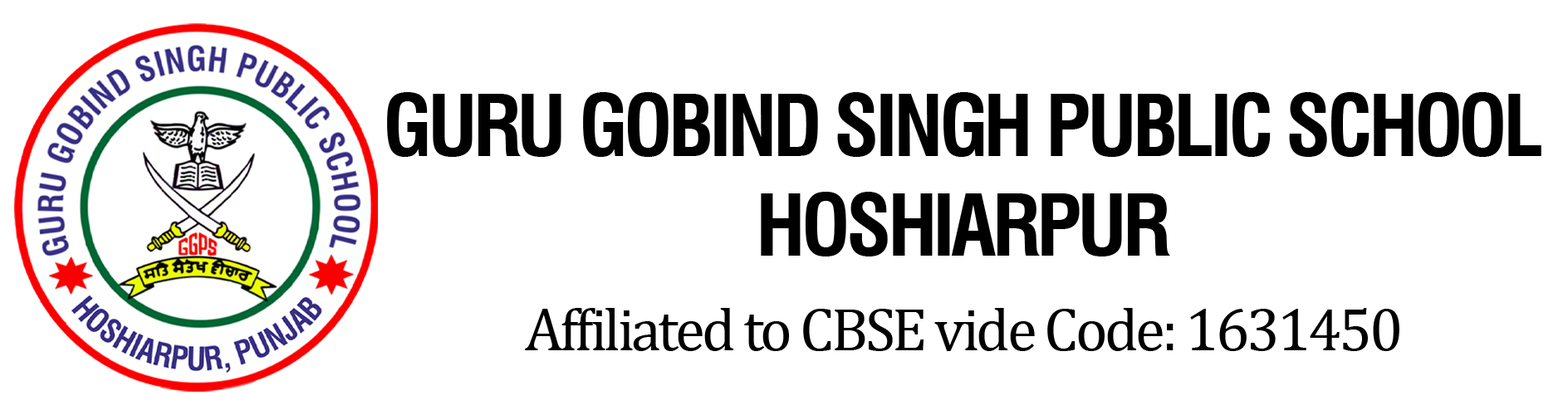
<style>
.page{position:relative;width:1568px;height:415px;background:#ffffff}
.page>*{position:absolute;margin:0}
.t1{font:83.1px "Swiss721BT-BoldCondensed";letter-spacing:-0.05em;color:#000000}
.t2{font:60.9px "CambriaMath";letter-spacing:-0.05em;color:#000000}
</style>
<div class="page">
<p class="t1" style="left:387px;top:92px;width:1154px;height:165px;text-align:center">GURU GOBIND SINGH PUBLIC SCHOOL<br>HOSHIARPUR</p>
<p class="t2" style="left:525px;top:308px;width:874px;height:43px">Affiliated to CBSE vide Code: 1631450</p>
</div>
